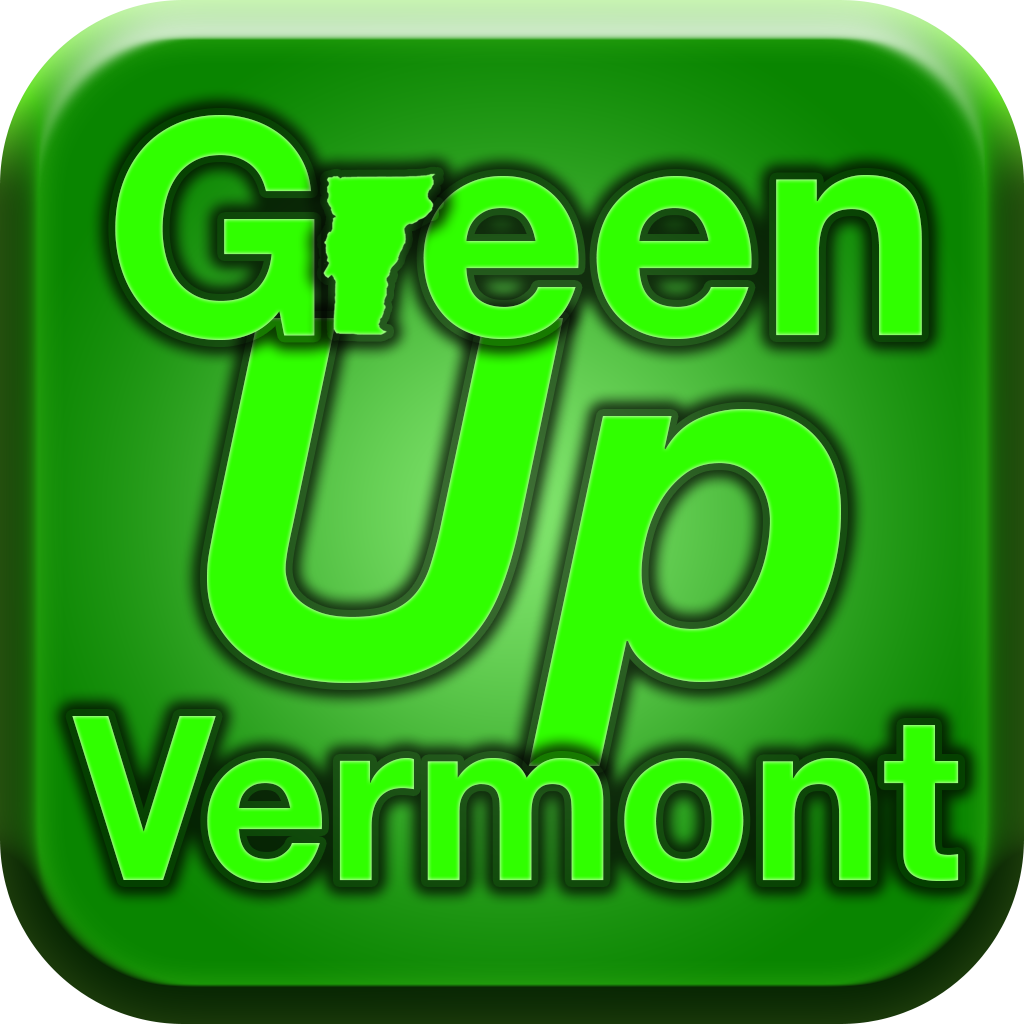
<style>
.page{position:relative;width:1024px;height:1024px}
.page>*{position:absolute;margin:0}
.t1{font:300px "HelveticaNeue-Bold";color:#30ff00}
.t2{font:500px "HelveticaNeue-BoldItalic";color:#30ff00}
.t3{font:230px "HelveticaNeue-Bold";color:#30ff00;scale:0.96 1}
</style>
<div class="page">
<p class="t1" style="left:115px;top:115px;width:807px;height:225px">G een</p>
<p class="t2" style="left:207px;top:318px;width:634px;height:448px">Up</p>
<p class="t3" style="left:72px;top:716px;width:887px;height:167px">Vermont</p>
</div>
